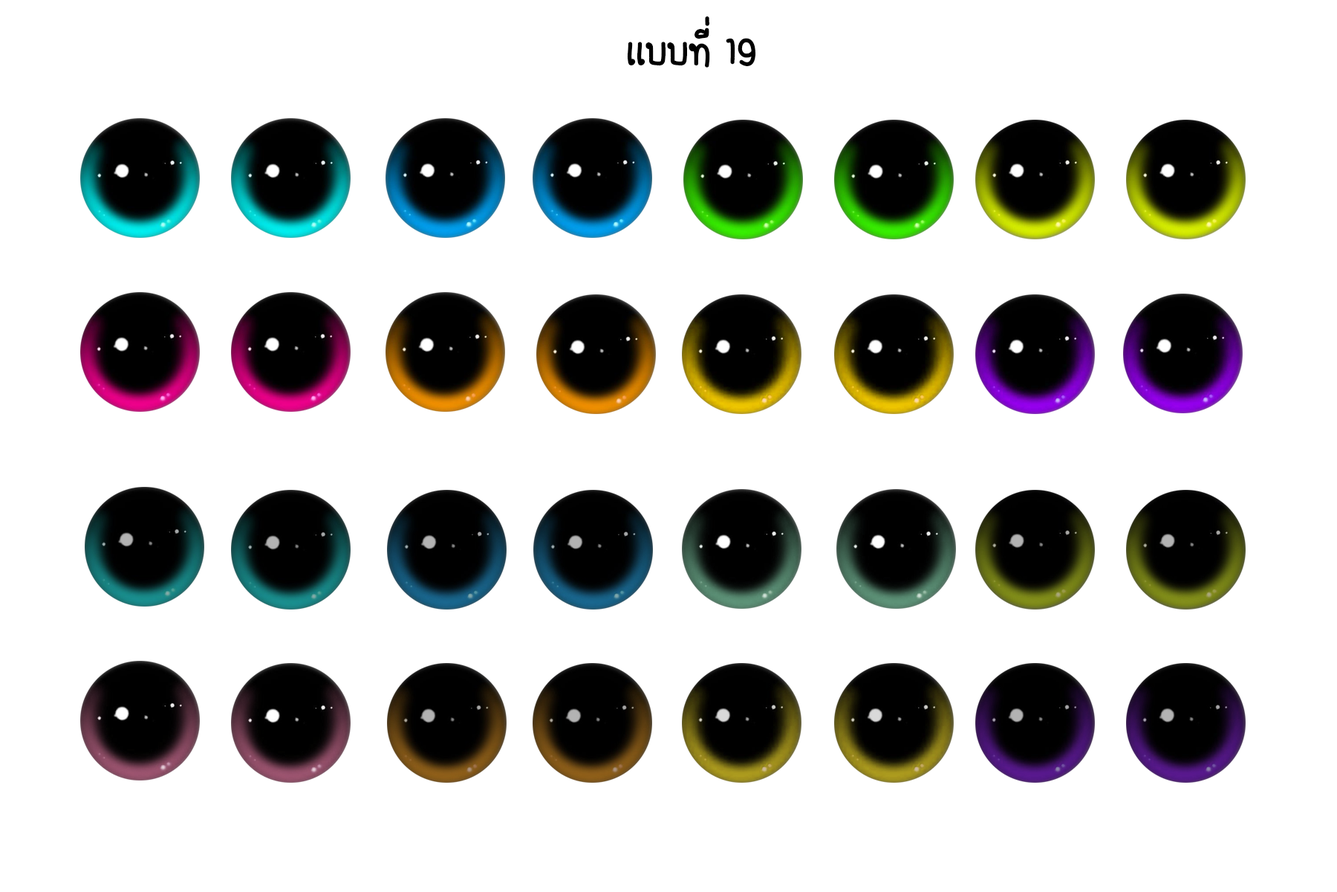
<style>
.page{position:relative;width:1337px;height:892px;background:#ffffff}
.page>*{position:absolute;margin:0}
.t1{font:55.7px "FCDaisyRegular";color:#000000}
</style>
<div class="page">
<p class="t1" style="left:627px;top:16px;width:129px;height:52px">เเบบที่ 19</p>
</div>
